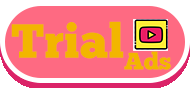
<style>
.page{position:relative;width:190px;height:88px;background:#fe6a82}
.page>*{position:absolute;margin:0}
.t1{font:47.8px "ChunkFive-Regular";color:#f2b600}
.t2{font:24px "ChunkFive-Regular";color:#f2b600}
</style>
<div class="page">
<p class="t1" style="left:11px;top:21px;width:113px;height:38px">Trial</p>
<p class="t2" style="left:124px;top:51px;width:47px;height:19px">Ads</p>
</div>
